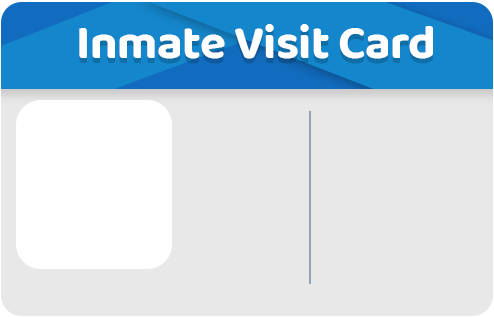
<style>
.page{position:relative;width:494px;height:317px;background:#e8e8e8}
.page>*{position:absolute;margin:0}
.t1{font:47.8px "BalooDa2-Bold";letter-spacing:-0.01em;color:#ffffff}
</style>
<div class="page">
<p class="t1" style="left:79px;top:24px;width:354px;height:35px">Inmate Visit Card</p>
</div>
